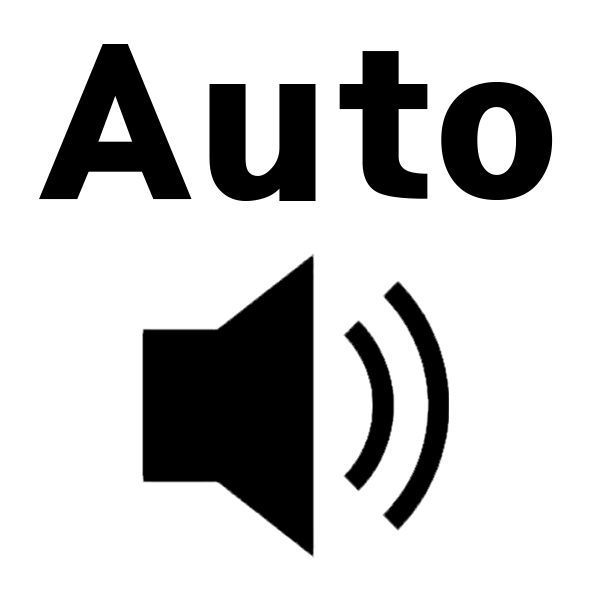
<style>
.page{position:relative;width:591px;height:591px;background:#ffffff}
.page>*{position:absolute;margin:0}
.t1{font:177.2px "HeadlineR-HM";color:#000000}
</style>
<div class="page">
<p class="t1" style="left:39px;top:44px;width:514px;height:157px">Auto</p>
</div>
